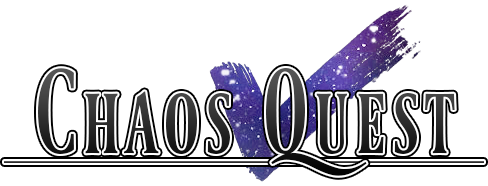
<style>
.page{position:relative;width:488px;height:186px;background:#ffffff}
.page>*{position:absolute;margin:0}
.t1{font:102px "Ferrum"}
</style>
<div class="page">
<p class="t1" style="left:38px;top:68px;width:417px;height:108px">Chaos Quest</p>
</div>
